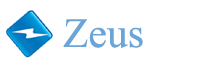
<style>
.page{position:relative;width:200px;height:60px;background:#ffffff}
.page>*{position:absolute;margin:0}
.t1{font:41.7px "TimesNewRomanPSMT";color:#6ba4d7}
</style>
<div class="page">
<p class="t1" style="left:63px;top:19px;width:80px;height:29px">Zeus</p>
</div>
